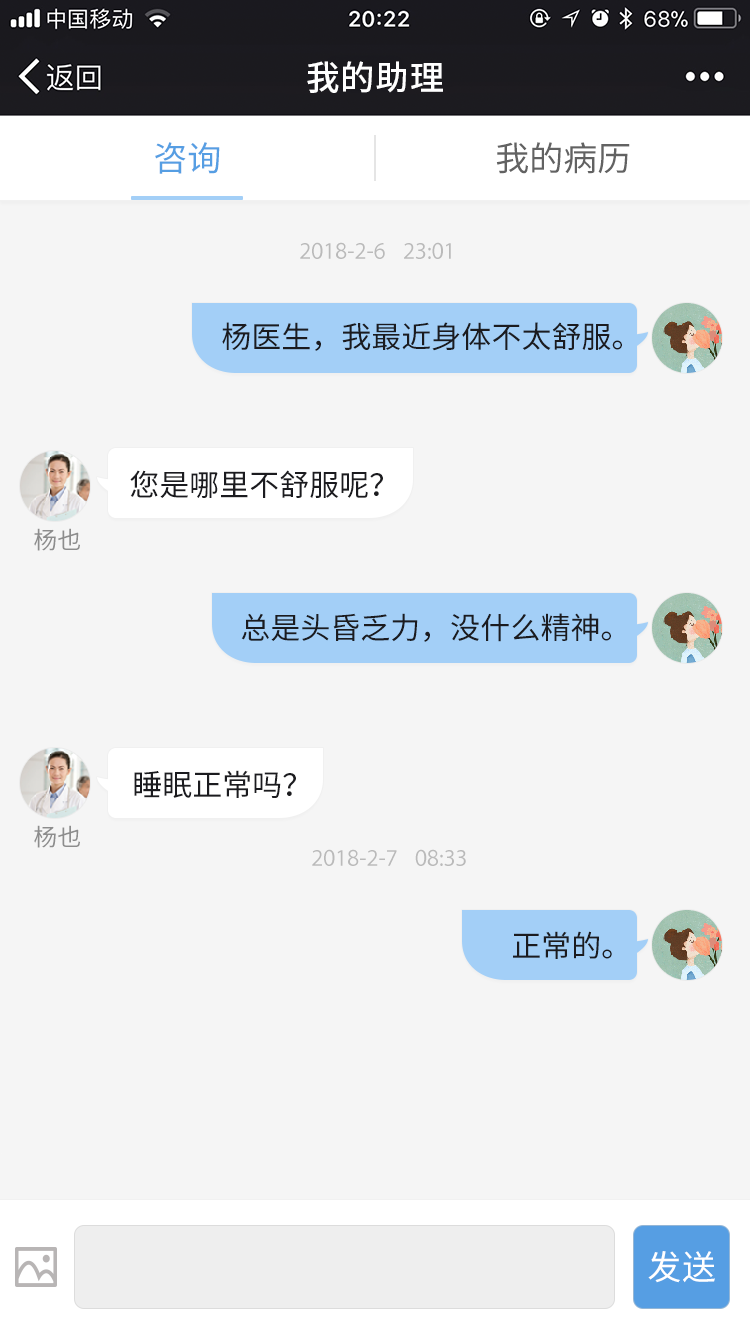
<style>
.page{position:relative;width:750px;height:1334px;background:#f5f5f5}
.page>*{position:absolute;margin:0}
.t1{font:34px "SourceHanSansCN-Medium";letter-spacing:0.02em;color:#ffffff}
.t2{font:34px "SourceHanSansCN-Regular";color:#569ee3}
.t3{font:34px "SourceHanSansCN-Regular";color:#626262}
.t4{font:24px "PingHei-Text";color:#bababa}
.t5{font:30px "SourceHanSansCN-Regular";color:#1b1b1f}
.t6{font:24px "SourceHanSansCN-Regular";color:#8d8d8d}
.t7{font:34px "SourceHanSansCN-Regular";letter-spacing:0.02em;color:#ffffff}
</style>
<div class="page">
<p class="t1" style="left:307px;top:61px;width:136px;height:32px">我的助理</p>
<p class="t2" style="left:155px;top:142px;width:65px;height:32px">咨询</p>
<p class="t3" style="left:496px;top:142px;width:134px;height:32px">我的病历</p>
<p class="t4" style="left:300px;top:242px;width:151px;height:17px">2018-2-6   23:01</p>
<p class="t5" style="left:222px;top:322px;width:400px;height:29px">杨医生，我最近身体不太舒服。</p>
<p class="t5" style="left:130px;top:470px;width:253px;height:28px">您是哪里不舒服呢？</p>
<p class="t6" style="left:34px;top:528px;width:46px;height:23px">杨也</p>
<p class="t5" style="left:241px;top:613px;width:370px;height:29px">总是头昏乏力，没什么精神。</p>
<p class="t5" style="left:134px;top:770px;width:162px;height:28px">睡眠正常吗？</p>
<p class="t6" style="left:34px;top:825px;width:46px;height:23px">杨也</p>
<p class="t4" style="left:312px;top:849px;width:154px;height:17px">2018-2-7   08:33</p>
<p class="t5" style="left:513px;top:931px;width:99px;height:28px">正常的。</p>
<p class="t7" style="left:648px;top:1251px;width:67px;height:32px">发送</p>
</div>
